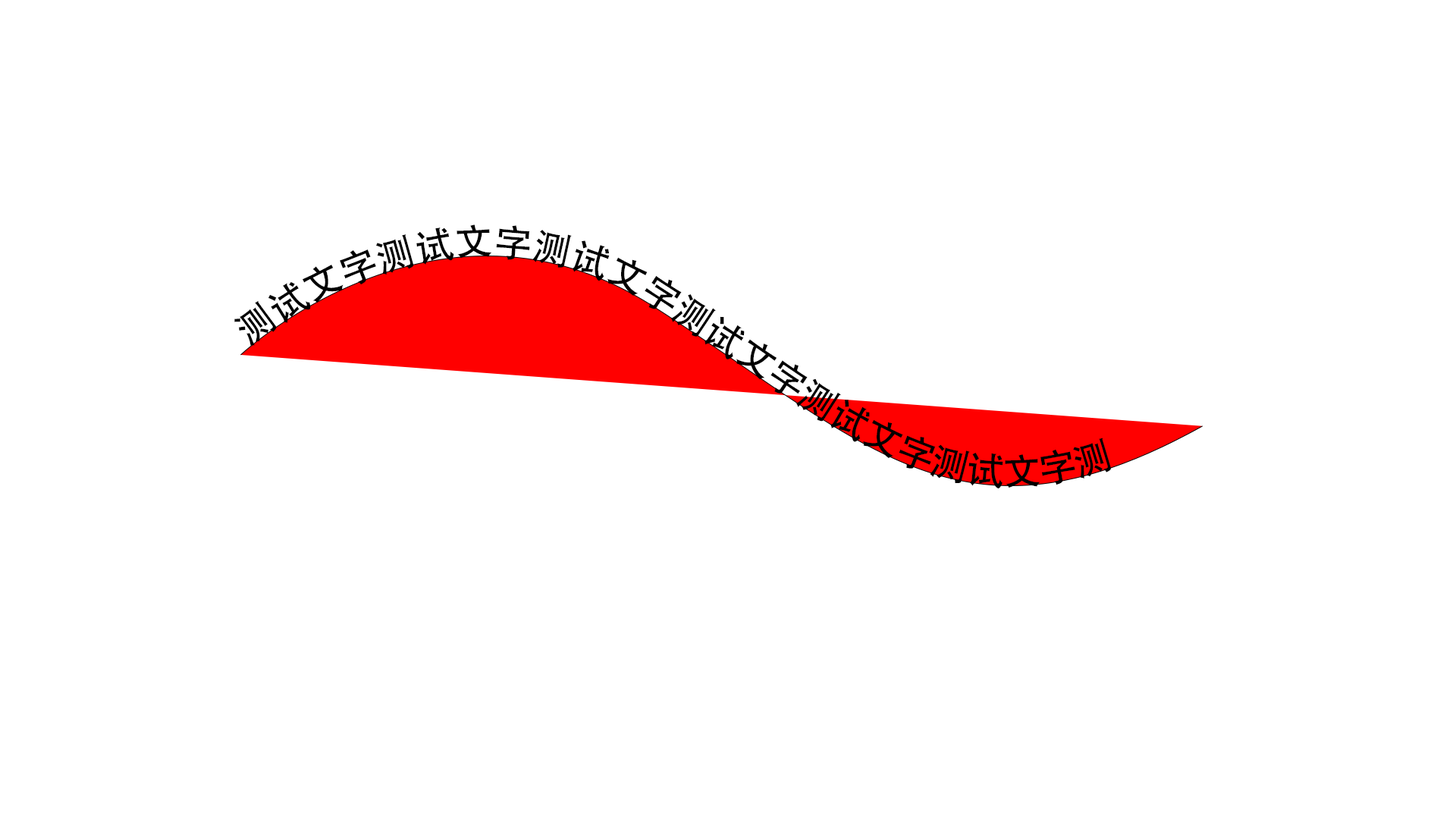
<style>
.page{position:relative;width:1456px;height:819px;background:#ffffff}
.page>*{position:absolute;margin:0}
.t1{font:37.9px "AdobeHeitiStd-Regular";color:#000000}
</style>
<div class="page">
<p class="t1" style="left:234px;top:224px;width:877px;height:264px;text-align:center">测试文字测试文字测试文字测试文字测试文字测试文字测试文字测试文字</p>
</div>
